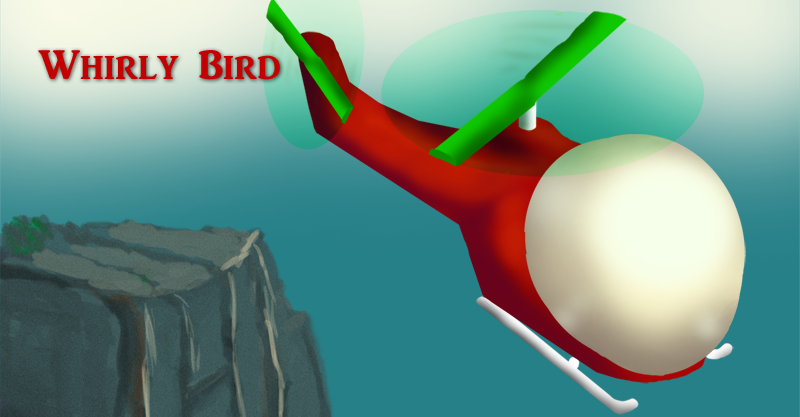
<style>
.page{position:relative;width:800px;height:417px}
.page>*{position:absolute;margin:0}
.t1{font:42.5px "ARJULIAN";color:#c50000}
</style>
<div class="page">
<p class="t1" style="left:38px;top:50px;width:242px;height:30px">Whirly Bird</p>
</div>
